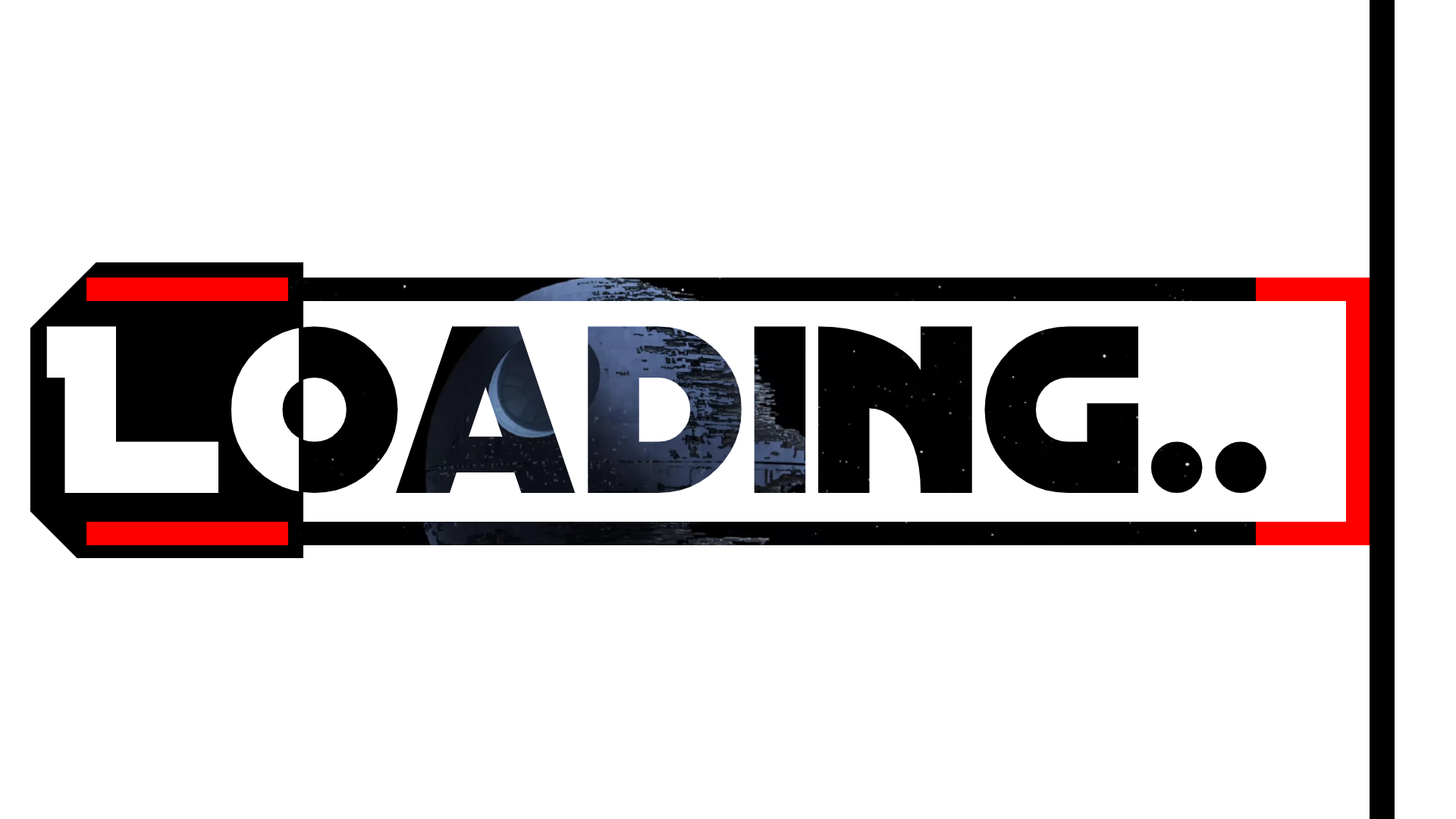
<style>
.page{position:relative;width:1456px;height:819px;background:#ffffff}
.page>*{position:absolute;margin:0}
.t1{font:256px "DistantGalaxy"}
</style>
<div class="page">
<p class="t1" style="left:46px;top:326px;width:1285px;height:167px">Loading...</p>
</div>
